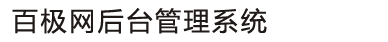
<style>
.page{position:relative;width:388px;height:42px;background:#ffffff}
.page>*{position:absolute;margin:0}
.t1{font:26px "MicrosoftYaHei";letter-spacing:0.1em;color:#1f1a17}
</style>
<div class="page">
<p class="t1" style="left:12px;top:8px;width:255px;height:26px">百极网后台管理系统</p>
</div>
